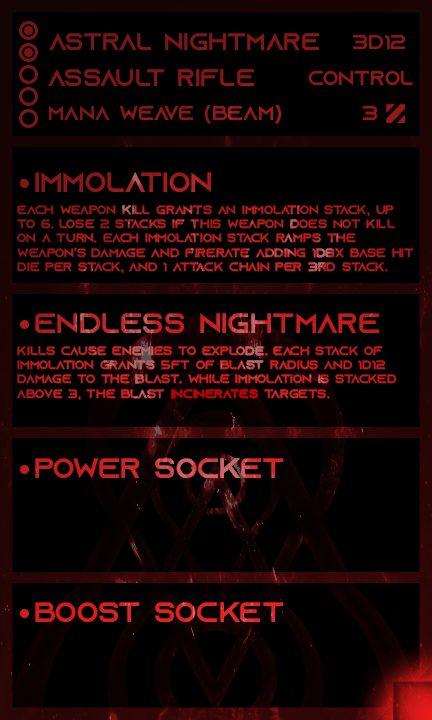
<style>
.page{position:relative;width:432px;height:720px;background:#000000}
.page>*{position:absolute;margin:0}
.t1{font:24px "AzonixRegular";color:#7d1616}
.t2{font:20px "AzonixRegular";color:#8b1717}
.t3{font:24px "AzonixRegular";color:#7e1616}
.t4{font:20px "AzonixRegular";color:#8e1717}
.t5{font:20px "AzonixRegular";color:#891717}
.t6{font:20px "AzonixRegular";color:#951717}
.t7{font:28px "AzonixRegular";color:#921818}
.t8{font:12px "AzonixRegular";color:#b21c1c}
.t9{font:28px "AzonixRegular";color:#c02121}
.t10{font:12px "AzonixRegular";color:#c62020}
.t11{font:28px "AzonixRegular"}
.t12{font:28px "AzonixRegular";color:#de2121}
</style>
<div class="page">
<p class="t1" style="left:49px;top:33px;width:270px;height:17px">astral nightmare</p>
<p class="t2" style="left:353px;top:35px;width:52px;height:15px">3d12</p>
<p class="t3" style="left:48px;top:69px;width:206px;height:17px">assault rifle</p>
<p class="t4" style="left:308px;top:71px;width:105px;height:14px">control</p>
<p class="t5" style="left:49px;top:105px;width:232px;height:19px">mana weave (beam)</p>
<p class="t6" style="left:363px;top:106px;width:14px;height:14px">3</p>
<p class="t7" style="left:35px;top:172px;width:176px;height:20px">immolation</p>
<p class="t8" style="left:17px;top:205px;width:397px;height:68px">each weapon kill grants an immolation stack, up <br>to 6. lose 2 stacks if this weapon does not kill <br>on a turn. each immolation stack ramps the <br>weapon’s damage and firerate adding 1d8x base hit <br>die per stack, and 1 attack chain per 3rd stack.</p>
<p class="t9" style="left:35px;top:313px;width:344px;height:20px">endless nightmare</p>
<p class="t10" style="left:17px;top:346px;width:380px;height:54px">kills cause enemies to explode. each stack of <br>immolation grants 5ft of blast radius and 1d12 <br>damage to the blast. while immolation is stacked<br>above 3, the blast incinerates targets.</p>
<p class="t11" style="left:35px;top:458px;width:248px;height:20px">power socket</p>
<p class="t12" style="left:35px;top:602px;width:248px;height:20px">boost socket</p>
</div>
